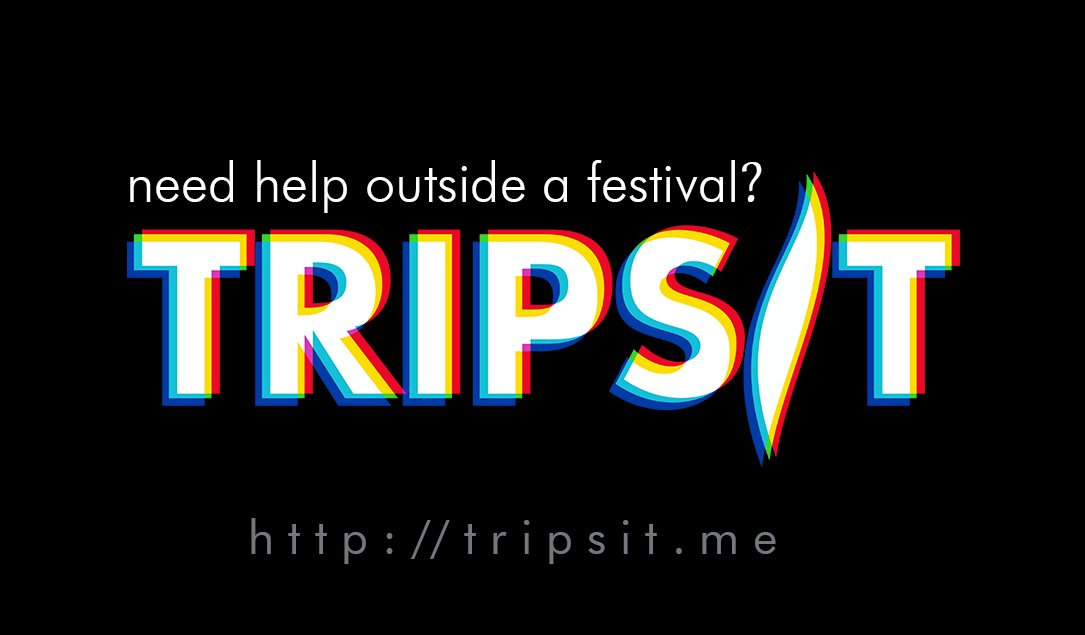
<style>
.page{position:relative;width:1085px;height:635px;background:#000000}
.page>*{position:absolute;margin:0}
.t1{font:54.2px "FuturaOblique";color:#ffffff}
.t2{font:54.2px "GentiumBasic";color:#ffffff}
.t3{font:47.2px "FuturaBT-Book";color:#76777b}
</style>
<div class="page">
<p class="t1" style="left:130px;top:160px;width:632px;height:53px"><span class="t2">?</span>need help outside a festival</p>
<p class="t3" style="left:251px;top:518px;width:525px;height:46px">h t t p : // t r i p s i t . m e</p>
</div>
